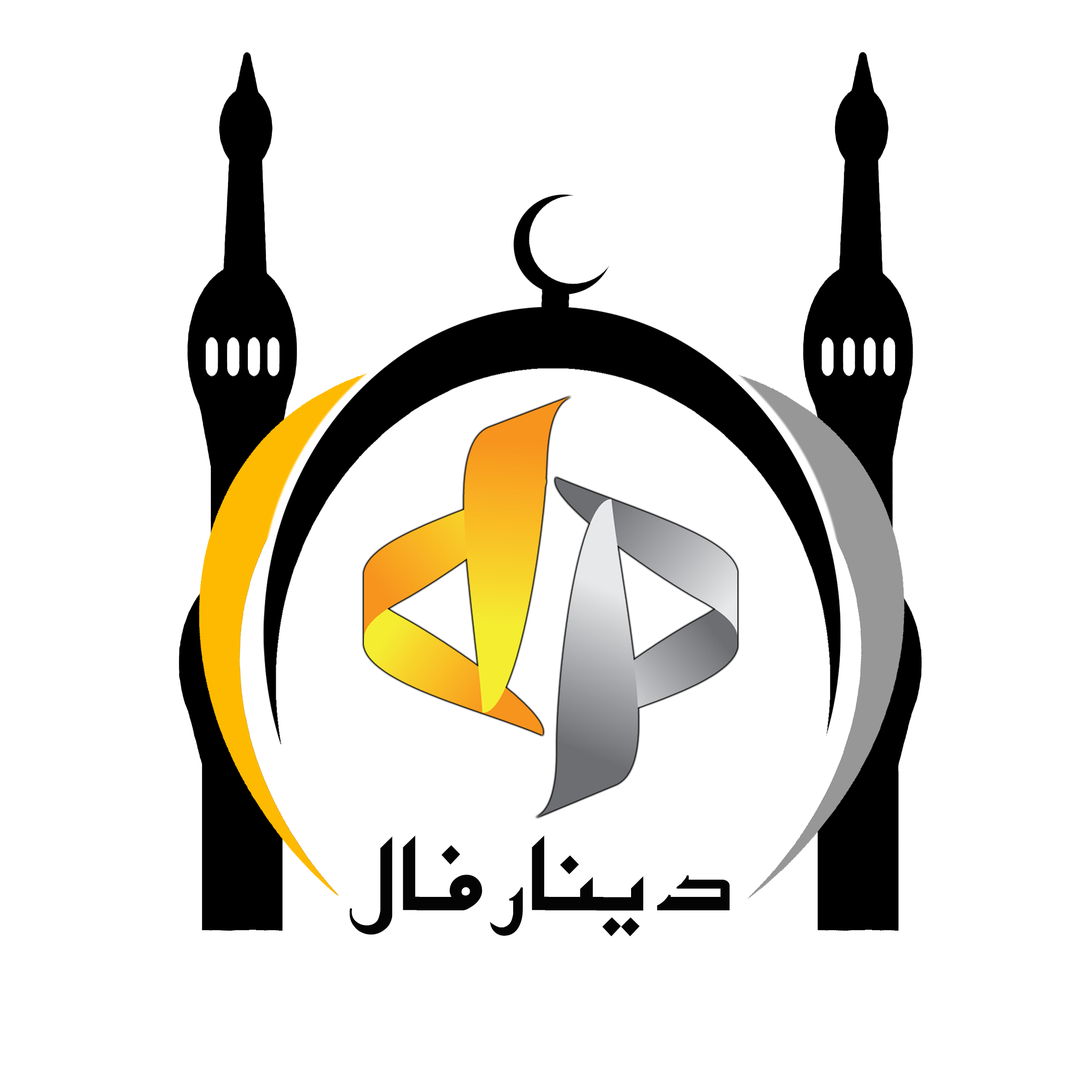
<style>
.page{position:relative;width:1092px;height:1092px;background:#ffffff}
.page>*{position:absolute;margin:0}
.t1{font:127.3px "MCS-Taif-S_U-normal.";color:#040404}
</style>
<div class="page">
<p class="t1" style="left:350px;top:835px;width:380px;height:102px">دينارفال</p>
</div>
